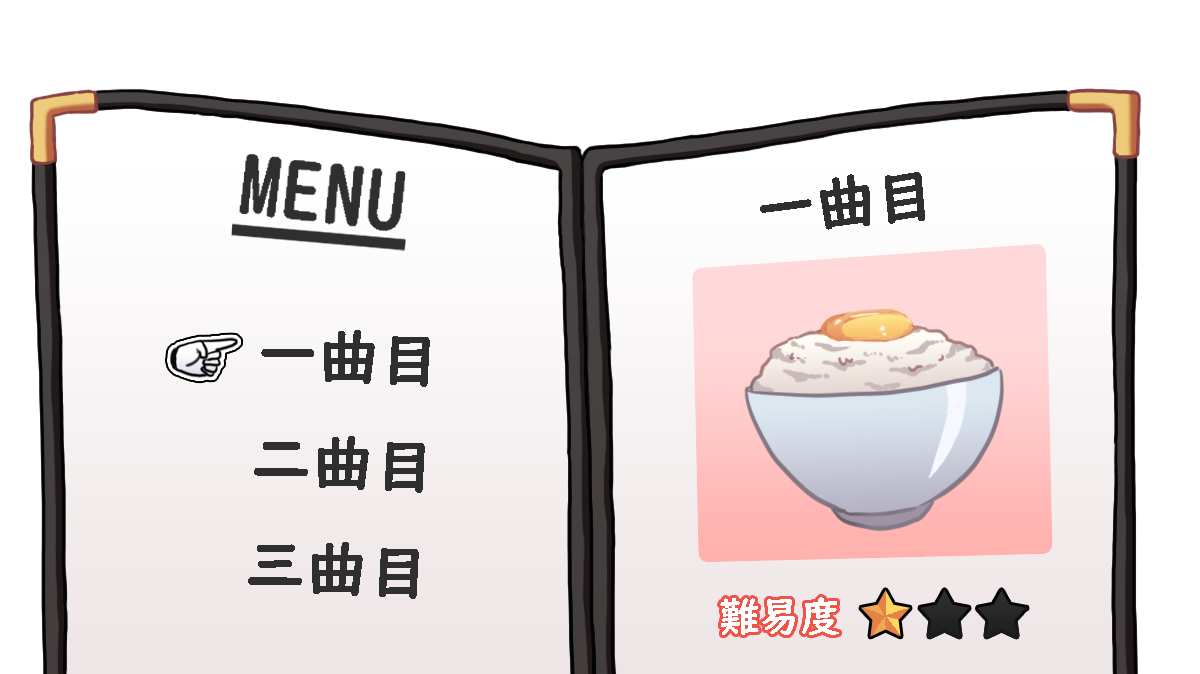
<style>
.page{position:relative;width:1200px;height:674px;background:#ffffff}
.page>*{position:absolute;margin:0}
.t1{font:59.8px "UDDigiKyokashoN-B";color:#2f2f2f}
.t2{font:60.5px "UDDigiKyokashoN-B";color:#2f2f2f}
.t3{font:40.6px "UDDigiKyokashoN-B";color:#ffffff}
</style>
<div class="page">
<p class="t1" style="left:760px;top:172px;width:165px;height:58px;rotate:-5deg">一曲目</p>
<p class="t2" style="left:248px;top:330px;width:182px;height:269px;text-align:center;rotate:3deg">一曲目<br>二曲目<br>三曲目</p>
<p class="t3" style="left:720px;top:597px;width:119px;height:38px">難易度</p>
</div>
